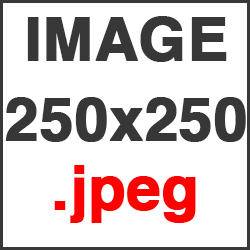
<style>
.page{position:relative;width:250px;height:250px;background:#ffffff}
.page>*{position:absolute;margin:0}
.t1{font:60px/80px "Helvetica-Bold";color:#373737;font-weight:bold}
.t2{font:60px "Helvetica-Bold";color:#ff0000;font-weight:bold}
</style>
<div class="page">
<p class="t1" style="left:5px;top:16px;width:241px;height:126px;text-align:center">IMAGE<br>250x250</p>
<p class="t2" style="left:54px;top:165px;width:142px;height:58px">.jpeg</p>
</div>
